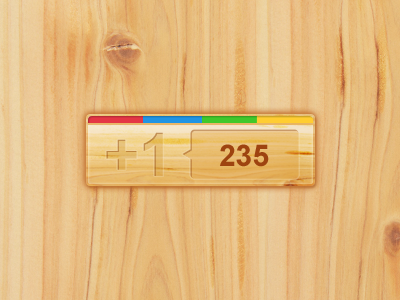
<style>
.page{position:relative;width:400px;height:300px}
.page>*{position:absolute;margin:0}
.t1{font:60px "Arial-BoldMT"}
.t2{font:30px "Arial-BoldMT";color:#9e4410}
</style>
<div class="page">
<p class="t1" style="left:106px;top:132px;width:57px;height:44px">+1</p>
<p class="t2" style="left:220px;top:144px;width:49px;height:23px">235</p>
</div>
